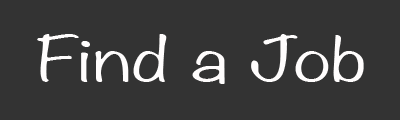
<style>
.page{position:relative;width:400px;height:120px;background:#333333}
.page>*{position:absolute;margin:0}
.t1{font:55px "Noteworthy-Light";color:#fffdfd;scale:1.5 1}
</style>
<div class="page">
<p class="t1" style="left:37px;top:34px;width:327px;height:50px">Find a Job</p>
</div>
